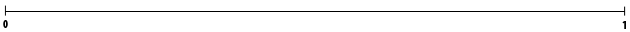
<style>
.page{position:relative;width:630px;height:32px;background:#ffffff}
.page>*{position:absolute;margin:0}
.t1{font:12px "MyriadPro-BoldCond";color:#000000}
</style>
<div class="page">
<p class="t1" style="left:3px;top:20px;width:5px;height:8px">0</p>
<p class="t1" style="left:622px;top:21px;width:4px;height:8px">1</p>
</div>
